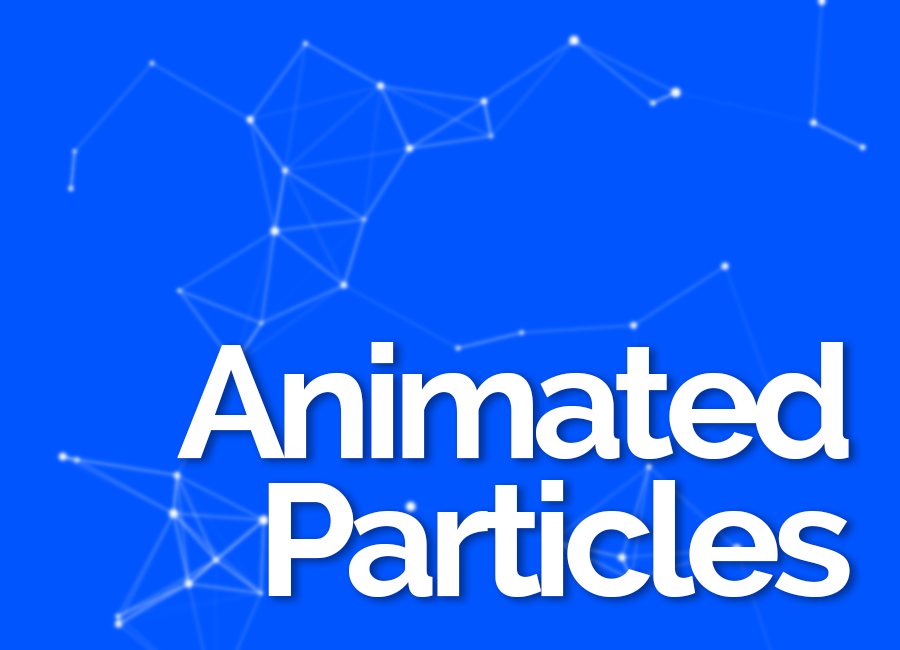
<style>
.page{position:relative;width:900px;height:650px;background:#0055ff}
.page>*{position:absolute;margin:0}
.t1{font:160.1px "Raleway-Bold";letter-spacing:-0.06em;color:#ffffff}
</style>
<div class="page">
<p class="t1" style="left:177px;top:342px;width:672px;height:117px">Animated</p>
<p class="t1" style="left:268px;top:480px;width:582px;height:117px">Particles</p>
</div>
